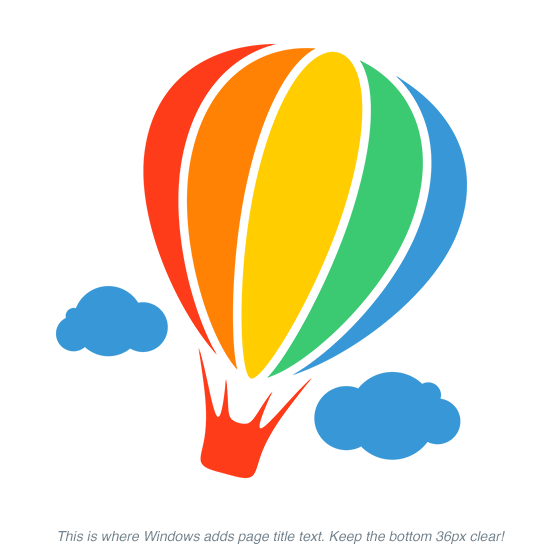
<style>
.page{position:relative;width:558px;height:558px;background:#ffffff}
.page>*{position:absolute;margin:0}
.t1{font:14px "Helvetica-Oblique";color:#73838e}
</style>
<div class="page">
<p class="t1" style="left:58px;top:531px;width:447px;height:13px">This is where Windows adds page title text. Keep the bottom 36px clear!</p>
</div>
